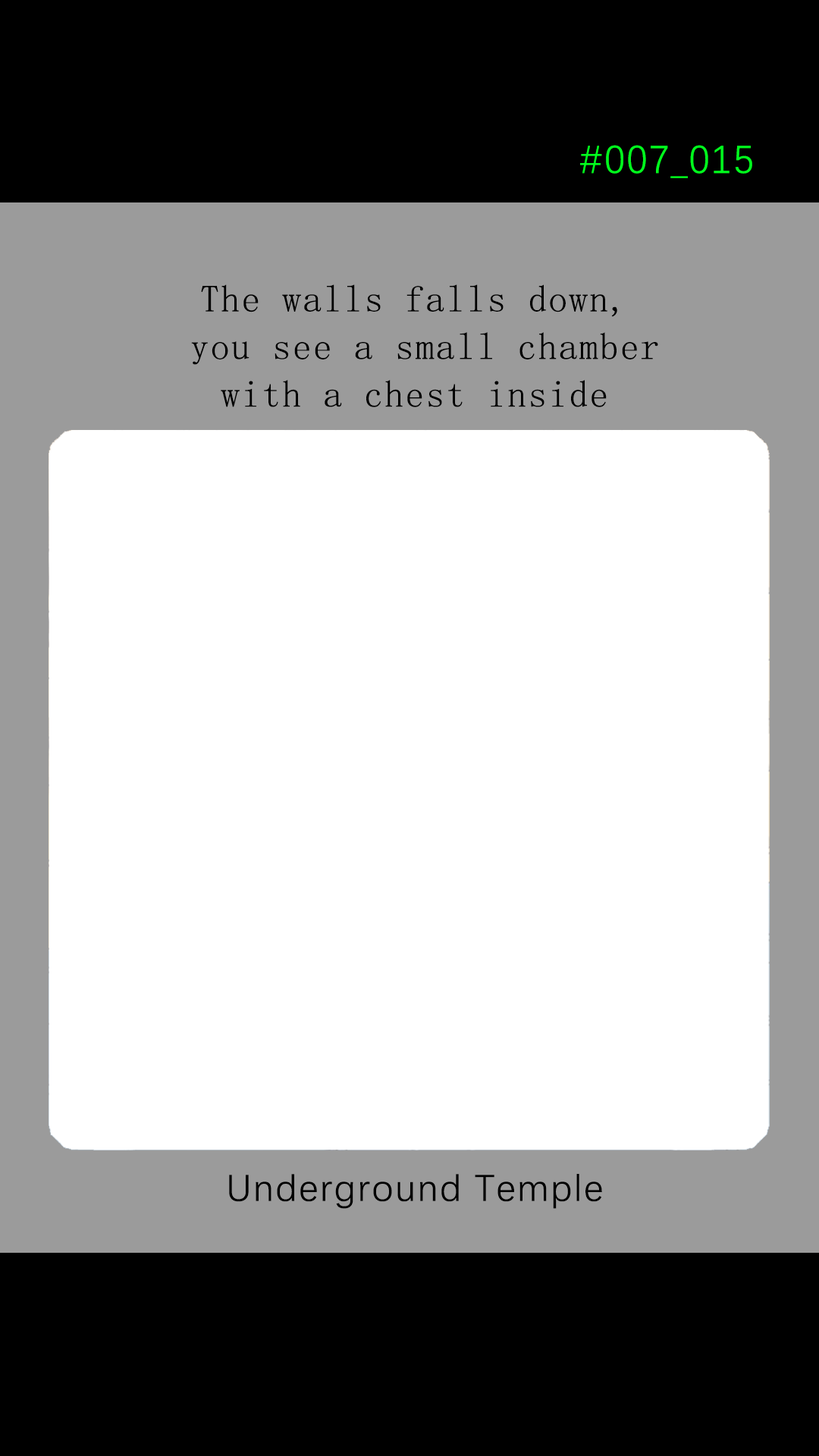
<style>
.page{position:relative;width:819px;height:1456px;background:#ffffff}
.page>*{position:absolute;margin:0}
.t1{font:39.2px "DengXian-Regular";letter-spacing:0.04em;color:#00ff1e}
.t2{font:37.9px/47.6px "SimSun";letter-spacing:0.04em;color:#000000}
.t3{font:37.9px "DengXian-Regular";letter-spacing:0.04em;color:#000000}
</style>
<div class="page">
<p class="t1" style="left:580px;top:145px;width:172px;height:33px">#007_015</p>
<p class="t2" style="left:191px;top:284px;width:467px;height:123px;text-align:center">The walls falls down,<br> you see a small chamber<br>with a chest inside</p>
<p class="t3" style="left:229px;top:1174px;width:373px;height:35px">Underground Temple</p>
</div>
